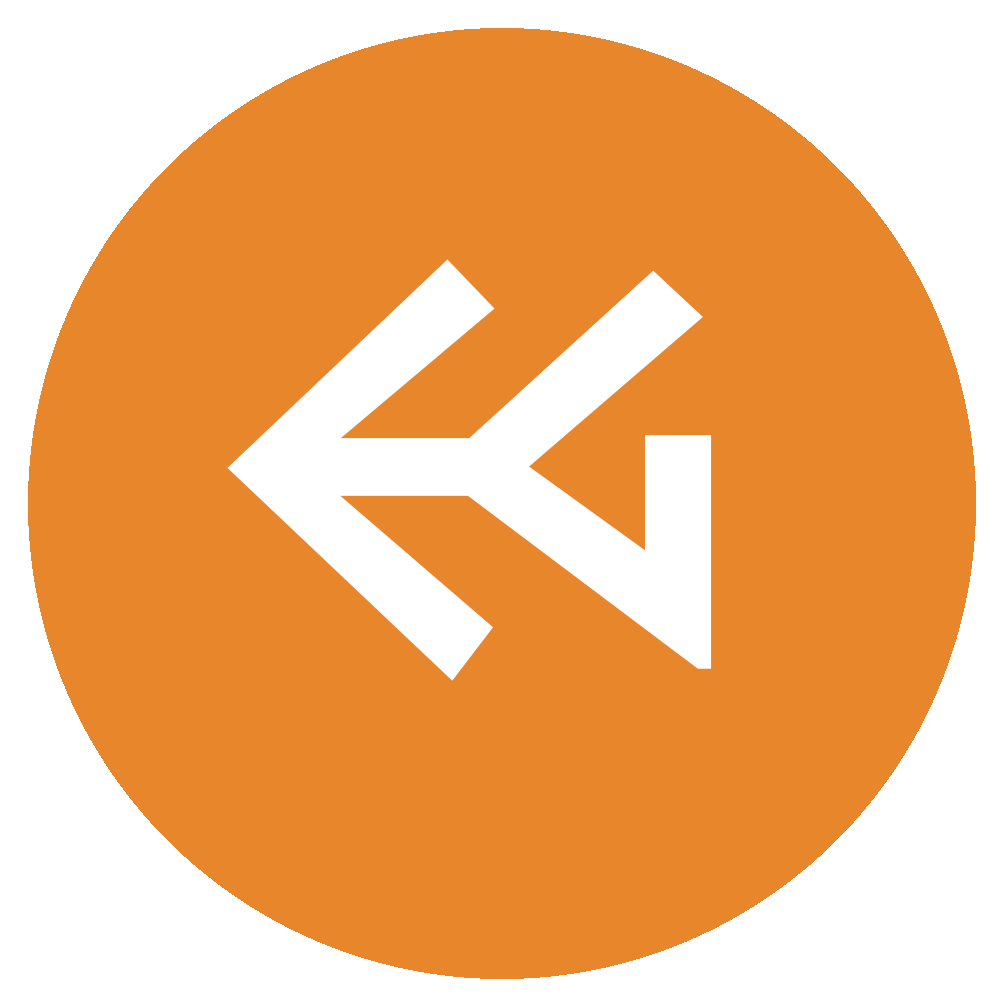
<style>
.page{position:relative;width:1000px;height:1000px;background:#e7862a}
.page>*{position:absolute;margin:0}
.t1{font:480.1px "DalekPinpointBold";color:#ffffff}
.t2{font:530.4px "DalekPinpointBold";color:#ffffff}
</style>
<div class="page">
<p class="t1" style="left:227px;top:259px;width:268px;height:422px">E</p>
<p class="t2" style="left:434px;top:270px;width:278px;height:399px">g</p>
</div>
